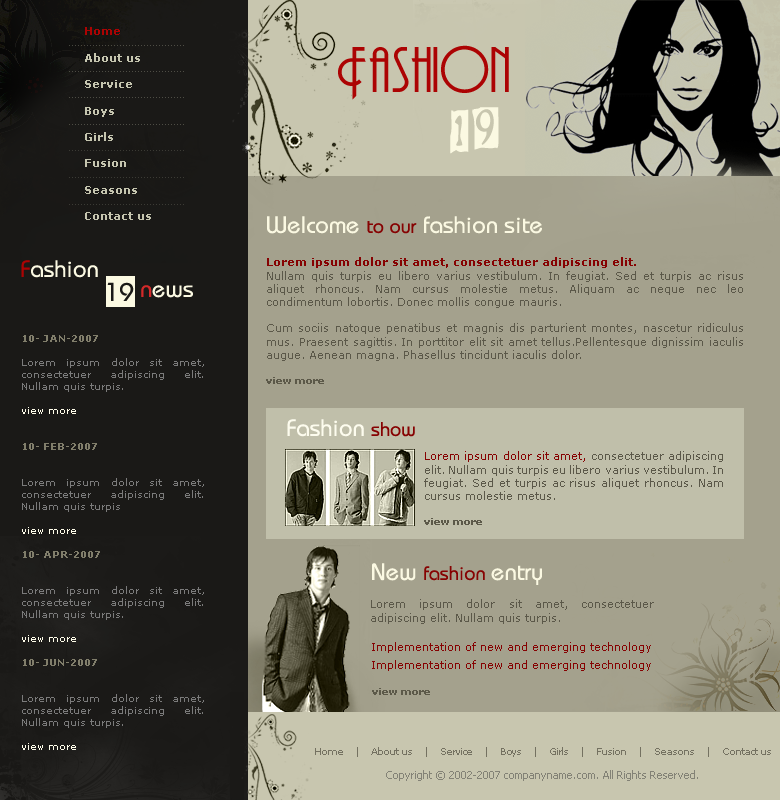
<style>
.page{position:relative;width:780px;height:800px;background:#a4a18d}
.page>*{position:absolute;margin:0}
.t1{font:11px "Verdana-Bold";color:#c5c5af}
.t2{font:11px "Verdana-Bold";color:#ac0303}
.t3{font:8px "Verdana";color:#4d4c44}
.t4{font:60px "AndesitePlain";color:#ac0303}
.t5{font:8px "Verdana";color:#4e4d45}
.t6{font:60px "BeatMyGuest";color:#fbf9e2}
.t7{font:8px "Verdana";color:#3c3b35}
.t8{font:8px "Verdana";color:#3b3b35}
.t9{font:24px "Bauhaus";color:#fbf9e2}
.t10{font:20px "Bauhaus";color:#860202}
.t11{font:11px "Verdana";color:#5b5849}
.t12{font:11px "Verdana-Bold";color:#860202}
.t13{font:10px "Verdana-Bold";color:#5c5949}
.t14{font:24px "Bauhaus";color:#ac0303}
.t15{font:26px "Bauhaus";color:#1a1917}
.t16{font:24px "Bauhaus";color:#d42929}
.t17{font:10px "Verdana";color:#7b7b7b}
.t18{font:10px "Verdana-Bold";color:#817e6b}
.t19{font:10px "Verdana";color:#fffdea}
.t20{font:11px "Verdana";color:#860202}
.t21{font:10px/24px "Verdana";letter-spacing:-0.1em;color:#747161}
.t22{font:10px/24px "Tahoma";color:#838276}
</style>
<div class="page">
<p class="t1" style="left:85px;top:27px;width:66px;height:193px"><span class="t2">Home<br><br></span>About us<br><br>Service<br><br>Boys<br><br>Girls<br><br>Fusion<br><br>Seasons<br><br>Contact us</p>
<p class="t3" style="left:69px;top:45px;width:115px;height:1px">.......................................</p>
<p class="t4" style="left:338px;top:45px;width:171px;height:55px">Fashion</p>
<p class="t5" style="left:69px;top:71px;width:115px;height:1px">.......................................</p>
<p class="t5" style="left:69px;top:97px;width:115px;height:1px">.......................................</p>
<p class="t6" style="left:450px;top:107px;width:49px;height:47px">19</p>
<p class="t5" style="left:69px;top:124px;width:115px;height:1px">.......................................</p>
<p class="t7" style="left:69px;top:150px;width:115px;height:1px">.......................................</p>
<p class="t8" style="left:69px;top:177px;width:115px;height:1px">.......................................</p>
<p class="t8" style="left:69px;top:204px;width:115px;height:1px">.......................................</p>
<p class="t9" style="left:267px;top:216px;width:275px;height:18px">Welcome <span class="t10">to our </span>fashion site</p>
<p class="t11" style="left:266px;top:257px;width:477px;height:127px;text-align:justify"><span class="t12">Lorem ipsum dolor sit amet, consectetuer adipiscing elit. <br></span>Nullam quis turpis eu libero varius vestibulum. In feugiat. Sed et turpis ac risus aliquet rhoncus. Nam cursus molestie metus. Aliquam ac neque nec leo condimentum lobortis. Donec mollis congue mauris. <br><br>Cum sociis natoque penatibus et magnis dis parturient montes, nascetur ridiculus mus. Praesent sagittis. In porttitor elit sit amet tellus.Pellentesque dignissim iaculis augue. Aenean magna. Phasellus tincidunt iaculis dolor.<br><br><span class="t13">view more</span></p>
<p class="t9" style="left:21px;top:260px;width:77px;height:18px"><span class="t14">F</span>ashion</p>
<p class="t15" style="left:107px;top:282px;width:27px;height:19px">19</p>
<p class="t9" style="left:141px;top:285px;width:52px;height:13px"><span class="t16">n</span>ews</p>
<p class="t17" style="left:22px;top:335px;width:182px;height:415px;text-align:justify"><span class="t18">10- JAN-2007<br><br></span>Lorem ipsum dolor sit amet, consectetuer adipiscing elit. Nullam quis turpis. <br><br><span class="t19">view more<br><br><br></span><span class="t18">10- FEB-2007<br><br><br></span>Lorem ipsum dolor sit amet, consectetuer adipiscing elit. Nullam quis turpis <br><br><span class="t19">view more<br><br></span><span class="t18">10- APR-2007<br><br><br></span>Lorem ipsum dolor sit amet, consectetuer adipiscing elit. Nullam quis turpis. <br><br><span class="t19">view more<br><br></span><span class="t18">10- JUN-2007<br><br><br></span>Lorem ipsum dolor sit amet, consectetuer adipiscing elit. Nullam quis turpis. <br><br><span class="t19">view more</span></p>
<p class="t11" style="left:424px;top:451px;width:299px;height:74px;text-align:justify"><span class="t20">Lorem ipsum dolor sit amet,</span> consectetuer adipiscing elit. Nullam quis turpis eu libero varius vestibulum. In feugiat. Sed et turpis ac risus aliquet rhoncus. Nam cursus molestie metus.<br><br><span class="t13">view more</span></p>
<p class="t10" style="left:372px;top:563px;width:170px;height:22px"><span class="t9">New </span>fashion <span class="t9">entry</span></p>
<p class="t11" style="left:371px;top:599px;width:283px;height:25px;text-align:justify">Lorem ipsum dolor sit amet, consectetuer adipiscing elit. Nullam quis turpis.</p>
<p class="t20" style="left:372px;top:642px;width:279px;height:11px">Implementation of new and emerging technology</p>
<p class="t20" style="left:372px;top:660px;width:279px;height:11px">Implementation of new and emerging technology</p>
<p class="t13" style="left:372px;top:688px;width:58px;height:7px">view more</p>
<p class="t21" style="left:315px;top:747px;width:456px;height:34px;text-align:center">Home    |    About us    |    Service    |    Boys    |    Girls    |    Fusion    |    Seasons    |    Contact us<br><span class="t22">Copyright © 2002-2007 companyname.com. All Rights Reserved.</span></p>
</div>
